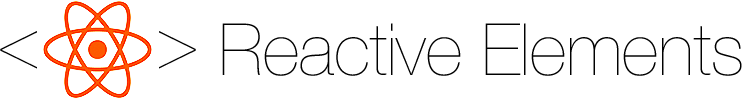
<style>
.page{position:relative;width:742px;height:99px;background:#ffffff}
.page>*{position:absolute;margin:0}
.t1{font:72px "HelveticaNeue-UltraLight";color:#000000}
</style>
<div class="page">
<p class="t1" style="left:222px;top:23px;width:520px;height:53px">Reactive Elements</p>
<p class="t1" style="left:0px;top:31px;width:37px;height:38px">&lt;</p>
<p class="t1" style="left:159px;top:31px;width:37px;height:38px;rotate:180deg">&lt;</p>
</div>
